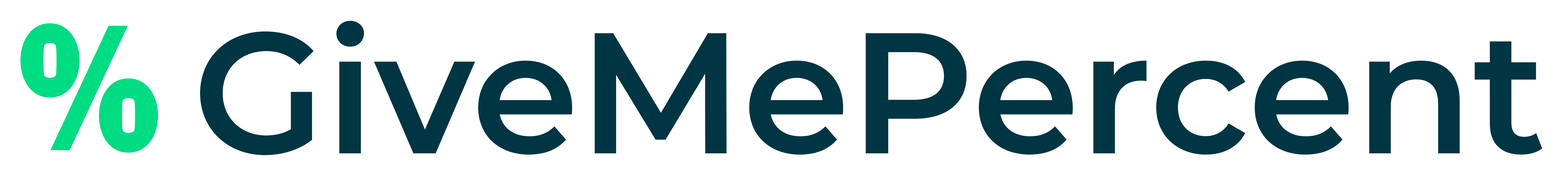
<style>
.page{position:relative;width:1568px;height:176px;background:#ffffff}
.page>*{position:absolute;margin:0}
.t1{font:171.9px "Montserrat-SemiBold";color:#003543}
</style>
<div class="page">
<p class="t1" style="left:200px;top:21px;width:1342px;height:134px">GiveMePercent</p>
</div>
